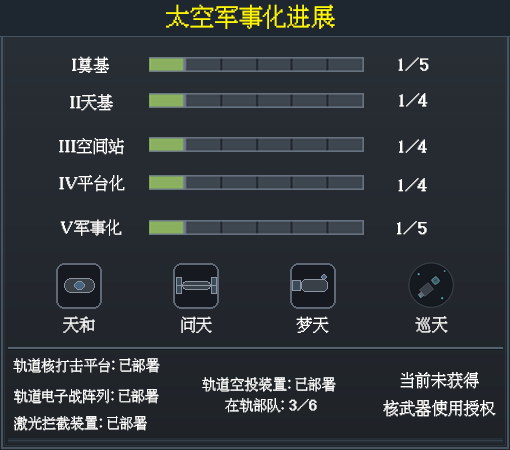
<style>
.page{position:relative;width:510px;height:450px}
.page>*{position:absolute;margin:0}
.t1{font:24px "IPix";color:#fff600}
.t2{font:16px "IPix";color:#ffffff}
.t3{font:14px "IPix";color:#ffffff}
.t4{font:14px "AdobeHeitiStd-Regular";color:#ffffff}
</style>
<div class="page">
<p class="t1" style="left:166px;top:4px;width:169px;height:25px">太空军事化进展</p>
<p class="t2" style="left:72px;top:56px;width:37px;height:17px">I奠基</p>
<p class="t2" style="left:398px;top:57px;width:31px;height:14px">1/5</p>
<p class="t2" style="left:70px;top:94px;width:43px;height:17px">II天基</p>
<p class="t2" style="left:399px;top:93px;width:29px;height:14px">1/4</p>
<p class="t2" style="left:59px;top:138px;width:65px;height:17px">III空间站</p>
<p class="t2" style="left:399px;top:139px;width:28px;height:14px">1/4</p>
<p class="t2" style="left:59px;top:175px;width:66px;height:17px">IV平台化</p>
<p class="t2" style="left:398px;top:178px;width:29px;height:14px">1/4</p>
<p class="t2" style="left:60px;top:219px;width:62px;height:17px">V军事化</p>
<p class="t2" style="left:397px;top:221px;width:30px;height:14px">1/5</p>
<p class="t2" style="left:63px;top:316px;width:32px;height:17px">天和</p>
<p class="t2" style="left:181px;top:316px;width:31px;height:17px">问天</p>
<p class="t2" style="left:296px;top:316px;width:33px;height:17px">梦天</p>
<p class="t2" style="left:415px;top:316px;width:33px;height:17px">巡天</p>
<p class="t3" style="left:13px;top:358px;width:147px;height:15px">轨道核打击平台<span class="t4">：</span>已部署</p>
<p class="t3" style="left:202px;top:377px;width:134px;height:15px">轨道空投装置<span class="t4">：</span>已部署</p>
<p class="t2" style="left:383px;top:372px;width:113px;height:45px;text-align:center">当前未获得<br>核武器使用授权</p>
<p class="t3" style="left:14px;top:389px;width:145px;height:15px">轨道电子战阵列<span class="t4">：</span>已部署</p>
<p class="t3" style="left:225px;top:398px;width:92px;height:15px">在轨部队<span class="t4">：</span>3/6</p>
<p class="t3" style="left:14px;top:416px;width:133px;height:15px">激光拦截装置<span class="t4">：</span>已部署</p>
</div>
